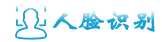
<style>
.page{position:relative;width:162px;height:42px;background:#ffffff}
.page>*{position:absolute;margin:0}
.t1{font:26px "JWT";color:#16a0d3;font-weight:bold}
</style>
<div class="page">
<p class="t1" style="left:52px;top:9px;width:103px;height:23px">人脸识别</p>
</div>
